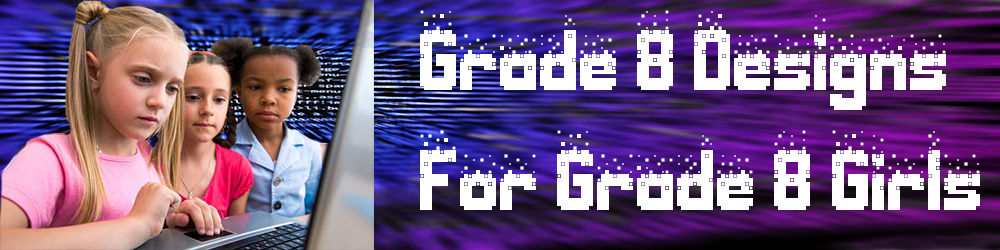
<style>
.page{position:relative;width:1000px;height:250px}
.page>*{position:absolute;margin:0}
.t1{font:100px "Nightmare-Codehack";color:#ffffff}
</style>
<div class="page">
<p class="t1" style="left:420px;top:10px;width:560px;height:200px">Grade 8 Designs <br>For Grade 8 Girls</p>
</div>
